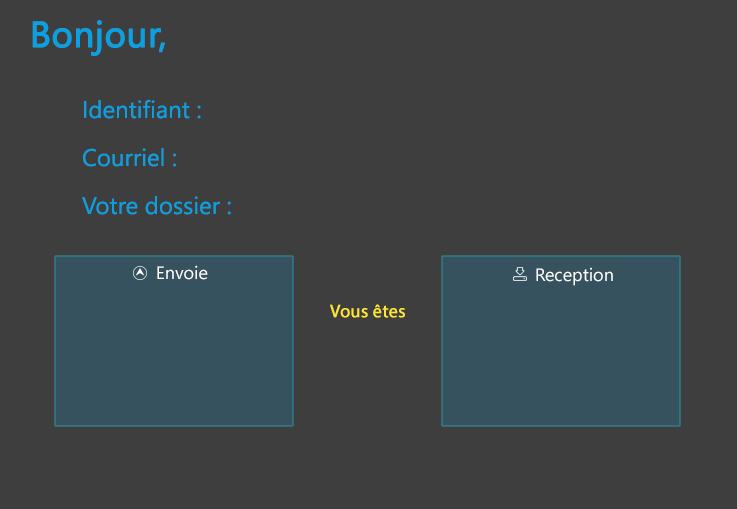
<style>
.page{position:relative;width:737px;height:509px;background:#3f3e3e}
.page>*{position:absolute;margin:0}
.t1{font:36px "SegoeUI";color:#0ba1e0;font-weight:bold}
.t2{font:24px/48px "SegoeUI";color:#0ba1e0}
.t3{font:18px "SegoeUI";color:#ffffff}
.t4{font:18px "MyriadPro-Regular";color:#ffe534;font-weight:bold}
</style>
<div class="page">
<p class="t1" style="left:32px;top:20px;width:133px;height:36px">Bonjour,</p>
<p class="t2" style="left:82px;top:99px;width:149px;height:116px">Identifiant :<br>Courriel :<br>Votre dossier :</p>
<p class="t3" style="left:157px;top:265px;width:51px;height:15px">Envoie</p>
<p class="t3" style="left:536px;top:267px;width:77px;height:19px">Reception</p>
<p class="t4" style="left:330px;top:304px;width:75px;height:14px">Vous êtes</p>
</div>
